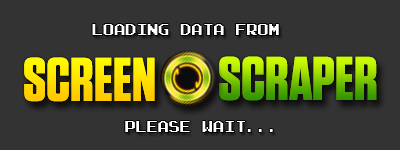
<style>
.page{position:relative;width:400px;height:150px;background:#333333}
.page>*{position:absolute;margin:0}
.t1{font:12px "ArcadeNormal";letter-spacing:0.01em;color:#ffffff;scale:0.93 1}
</style>
<div class="page">
<p class="t1" style="left:92px;top:24px;width:187px;height:11px">LOADING DATA FROM</p>
<p class="t1" style="left:125px;top:121px;width:148px;height:11px">PLEASE WAit...</p>
</div>
